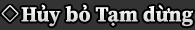
<style>
.page{position:relative;width:195px;height:30px;background:#333333}
.page>*{position:absolute;margin:0}
.t1{font:21px "SourceSerifRoman-Bold";letter-spacing:0.011em;color:#e6e6e6}
</style>
<div class="page">
<p class="t1" style="left:21px;top:4px;width:172px;height:23px">Hủy bỏ Tạm dừng</p>
</div>
